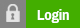
<style>
.page{position:relative;width:80px;height:28px;background:#43ae00}
.page>*{position:absolute;margin:0}
.t1{font:14.5px "ArchivoNarrow-Bold";color:#ffffff}
</style>
<div class="page">
<p class="t1" style="left:37px;top:9px;width:32px;height:14px">Login</p>
</div>
